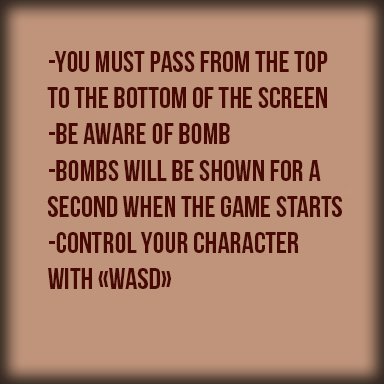
<style>
.page{position:relative;width:384px;height:384px;background:#bf947a}
.page>*{position:absolute;margin:0}
.t1{font:30px "BebasNeueBold";color:#480904}
</style>
<div class="page">
<p class="t1" style="left:47px;top:51px;width:295px;height:238px">-You must pass from the top <br>to the bottom of the screen<br>-Be aware of bomb<br>-bombs will be shown for a <br>second when the game starts<br>-control your character <br>with «WASD»</p>
</div>
